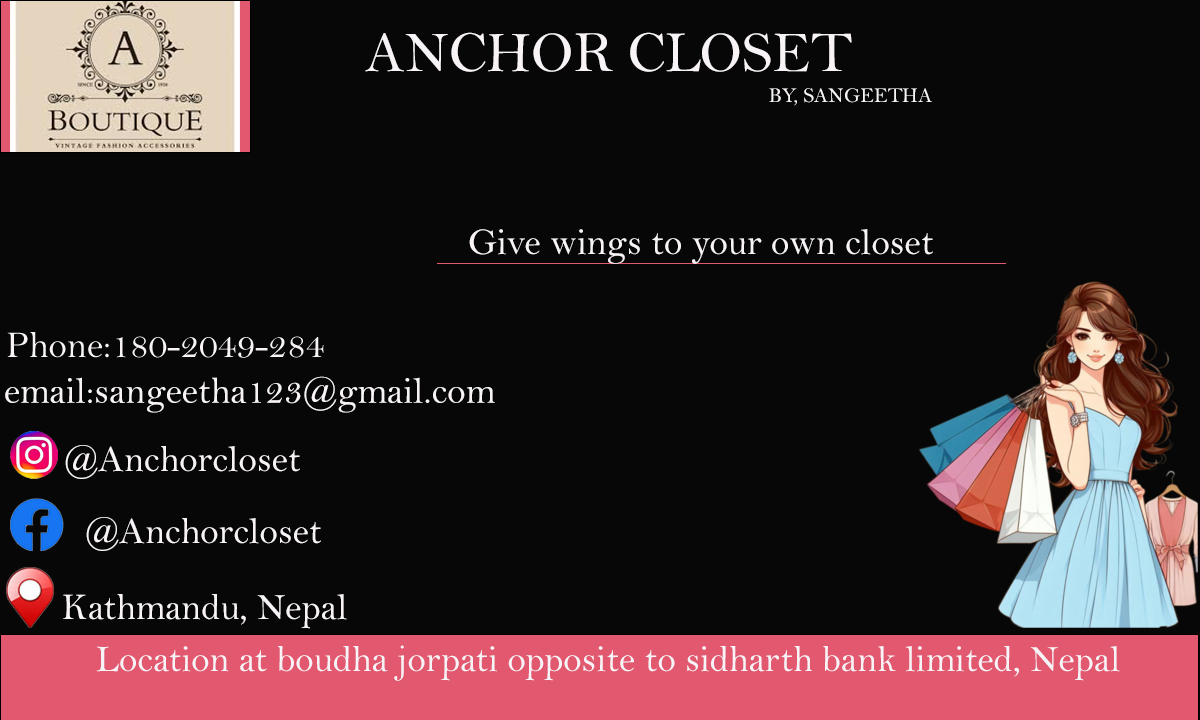
<style>
.page{position:relative;width:1200px;height:720px;background:#070707}
.page>*{position:absolute;margin:0}
.t1{font:58.3px "BellMT";color:#f7f3f7}
.t2{font:20.8px "BellMT";color:#f7f3f7}
.t3{font:37.5px "BellMT";color:#f7f3f7}
</style>
<div class="page">
<p class="t1" style="left:365px;top:32px;width:487px;height:40px">ANCHOR CLOSET</p>
<p class="t2" style="left:769px;top:88px;width:163px;height:18px">BY, SANGEETHA</p>
<p class="t3" style="left:469px;top:229px;width:464px;height:35px">Give wings to your own closet</p>
<p class="t3" style="left:5px;top:376px;width:490px;height:37px">email:sangeetha123@gmail.com</p>
<p class="t3" style="left:65px;top:445px;width:235px;height:34px">@Anchorcloset</p>
<p class="t3" style="left:86px;top:517px;width:235px;height:34px">@Anchorcloset</p>
<p class="t3" style="left:63px;top:594px;width:284px;height:35px">Kathmandu, Nepal</p>
<p class="t3" style="left:96px;top:645px;width:1024px;height:36px">Location at boudha jorpati opposite to sidharth bank limited, Nepal</p>
</div>
